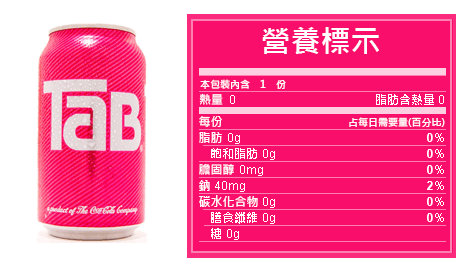
<style>
.page{position:relative;width:476px;height:270px;background:#fa0e6c}
.page>*{position:absolute;margin:0}
.t1{font:30px "MicrosoftJhengHeiBold";color:#ffffff}
.t2{font:10px "MicrosoftJhengHeiBold";color:#ffffff}
.t3{font:12px "MicrosoftJhengHeiBold";color:#ffffff}
</style>
<div class="page">
<p class="t1" style="left:262px;top:27px;width:117px;height:27px">營養標示</p>
<p class="t2" style="left:200px;top:79px;width:86px;height:10px">本包裝內含　1　份</p>
<p class="t3" style="left:199px;top:93px;width:24px;height:12px">熱量</p>
<p class="t3" style="left:376px;top:94px;width:58px;height:11px">脂肪含熱量</p>
<p class="t3" style="left:199px;top:116px;width:23px;height:11px">每份</p>
<p class="t2" style="left:349px;top:117px;width:96px;height:10px">占每日需要量(百分比)</p>
<p class="t3" style="left:199px;top:132px;width:23px;height:11px">脂肪</p>
<p class="t3" style="left:211px;top:148px;width:46px;height:11px">飽和脂肪</p>
<p class="t3" style="left:199px;top:164px;width:35px;height:11px">膽固醇</p>
<p class="t3" style="left:199px;top:180px;width:11px;height:11px">鈉</p>
<p class="t3" style="left:199px;top:195px;width:59px;height:12px">碳水化合物</p>
<p class="t3" style="left:211px;top:212px;width:46px;height:11px">膳食纖維</p>
<p class="t3" style="left:211px;top:228px;width:10px;height:11px">糖</p>
</div>
